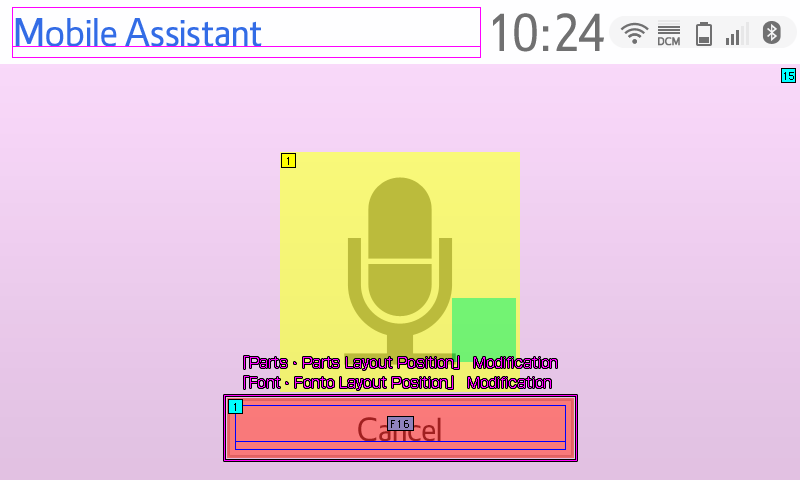
<style>
.page{position:relative;width:800px;height:480px}
.page>*{position:absolute;margin:0}
.t1{font:48px "Tfont1502_T2S";letter-spacing:0.05em;color:#707071}
.t2{font:36px "Tfont1502_T1S";color:#336ce6}
.t3{font:14px/20px "ShinGoPro-Regular";color:#ff00ff}
.t4{font:30px "Tfont1502_T1S";color:#a02020}
</style>
<div class="page">
<p class="t1" style="left:493px;top:13px;width:111px;height:39px">10:24</p>
<p class="t2" style="left:15px;top:18px;width:247px;height:29px">Mobile Assistant</p>
<p class="t3" style="left:244px;top:356px;width:313px;height:34px">「Parts・Parts Layout Position」 Modification<br>「Font・Fonto Layout Position」 Modification</p>
<p class="t4" style="left:358px;top:417px;width:83px;height:25px">Cancel</p>
</div>
